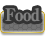
<style>
.page{position:relative;width:45px;height:36px;background:#ffffff}
.page>*{position:absolute;margin:0}
.t1{font:17px "RyuminPro-ExBold";letter-spacing:-0.08em;color:#818181;font-weight:bold;scale:0.9 1}
</style>
<div class="page">
<p class="t1" style="left:5px;top:8px;width:35px;height:14px">Food</p>
</div>
